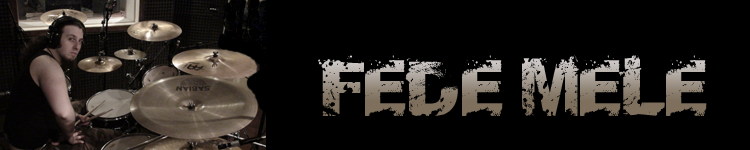
<style>
.page{position:relative;width:750px;height:150px;background:#000000}
.page>*{position:absolute;margin:0}
.t1{font:66.7px "SoulMission"}
</style>
<div class="page">
<p class="t1" style="left:318px;top:55px;width:389px;height:61px">FEDE MELE</p>
</div>
